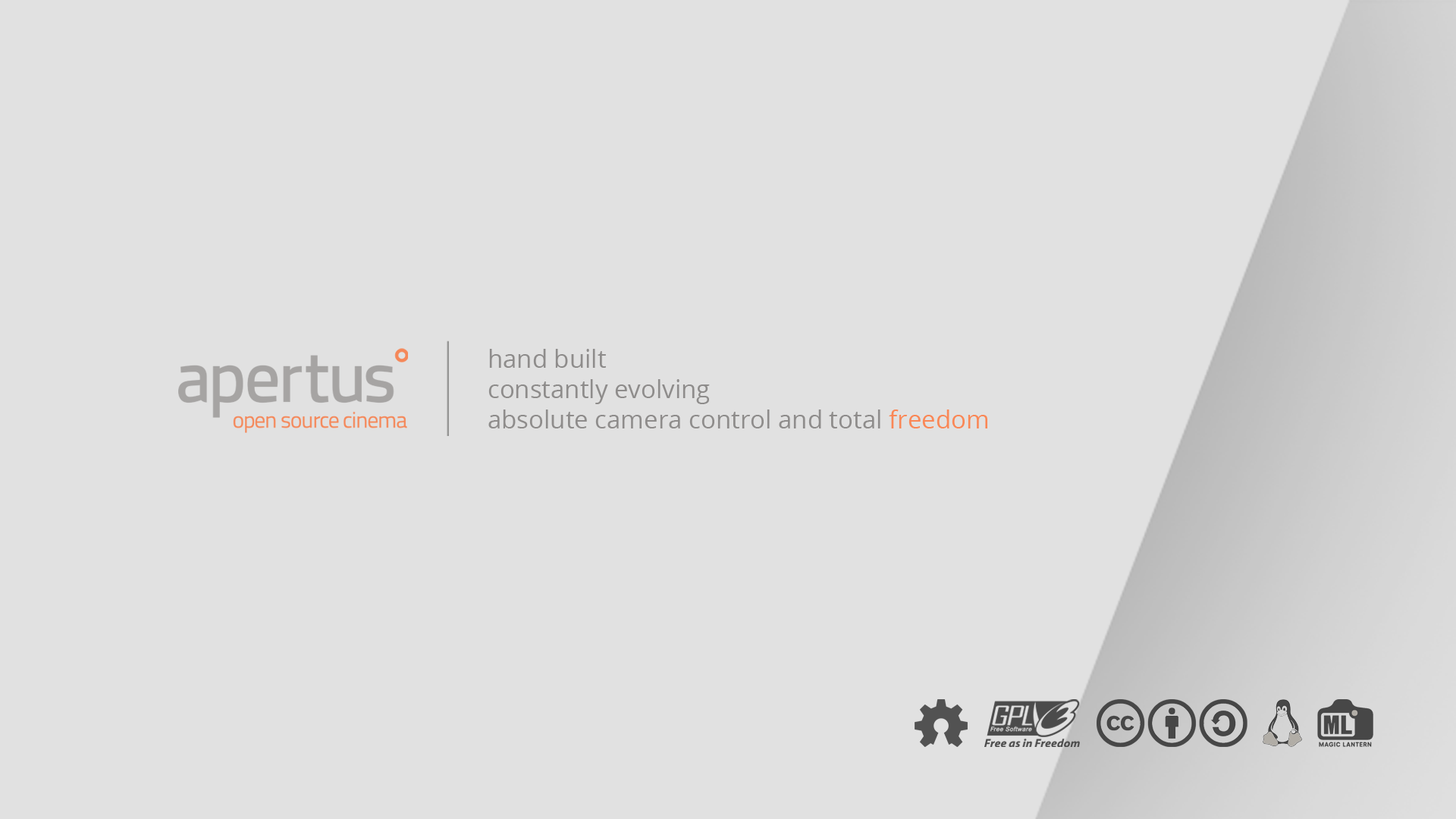
<style>
.page{position:relative;width:1456px;height:819px;background:#e1e1e1}
.page>*{position:absolute;margin:0}
.t1{font:25px "OpenSans";color:#8e8c8b}
.t2{font:25px "OpenSans";color:#fa8756}
</style>
<div class="page">
<p class="t1" style="left:488px;top:349px;width:499px;height:79px">hand built<br>constantly evolving<br>absolute camera control and total <span class="t2">freedom</span></p>
</div>
